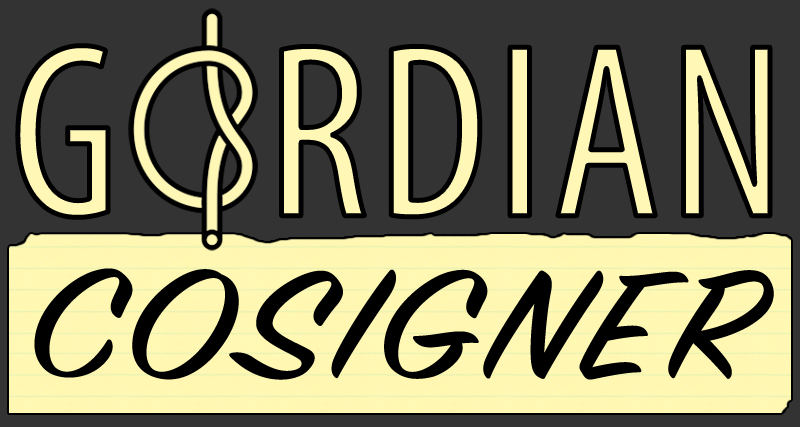
<style>
.page{position:relative;width:800px;height:427px;background:#333333}
.page>*{position:absolute;margin:0}
.t1{font:250px "MyriadPro-Cond";letter-spacing:0.03em;color:#fff7b6}
.t2{font:170px "SignPainter-HouseScript";letter-spacing:0.03em;color:#000000;scale:1.2 1}
</style>
<div class="page">
<p class="t1" style="left:17px;top:45px;width:753px;height:173px">G   RDIAN</p>
<p class="t2" style="left:34px;top:268px;width:740px;height:112px">COSIGNER</p>
</div>
